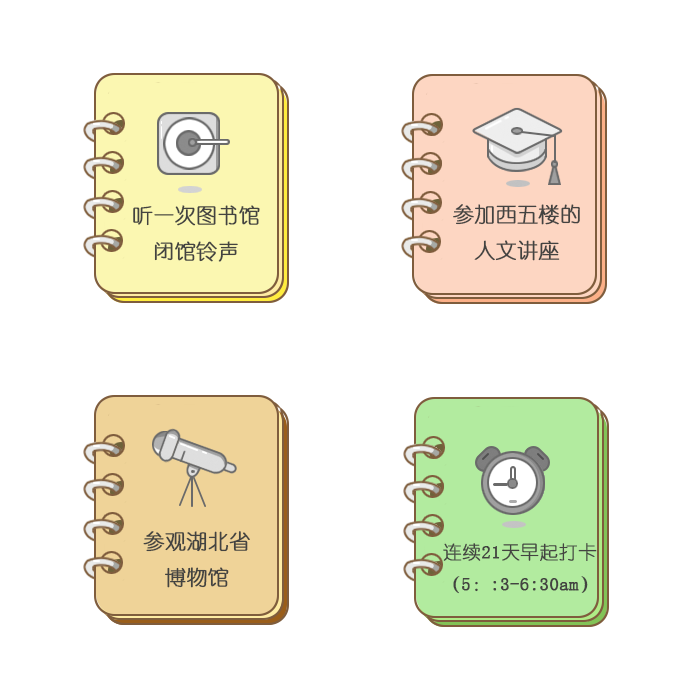
<style>
.page{position:relative;width:700px;height:700px;background:#ffffff}
.page>*{position:absolute;margin:0}
.t1{font:20.8px "YouYuan";color:#434341;font-weight:bold}
.t2{font:18.7px "YouYuan";color:#434341;font-weight:bold}
</style>
<div class="page">
<p class="t1" style="left:133px;top:205px;width:127px;height:57px;text-align:center">听一次图书馆<br>闭馆铃声</p>
<p class="t1" style="left:453px;top:204px;width:127px;height:57px;text-align:center">参加西五楼的<br>人文讲座</p>
<p class="t1" style="left:143px;top:531px;width:107px;height:57px;text-align:center">参观湖北省<br>博物馆</p>
<p class="t2" style="left:443px;top:543px;width:154px;height:51px;text-align:center">连续21天早起打卡<br>（5：:3-6:30am）</p>
</div>
